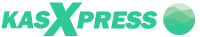
<style>
.page{position:relative;width:200px;height:37px;background:#ffffff}
.page>*{position:absolute;margin:0}
.t1{font:50px "FranklinGothic-Heavy";color:#2dc997;font-style:italic}
.t2{font:25.2px "FranklinGothic-Heavy";color:#2dc997;font-style:italic}
</style>
<div class="page">
<p class="t1" style="left:43px;top:2px;width:40px;height:34px">X</p>
<p class="t2" style="left:1px;top:11px;width:50px;height:18px">KAS</p>
<p class="t2" style="left:77px;top:11px;width:81px;height:18px">PRESS</p>
</div>
